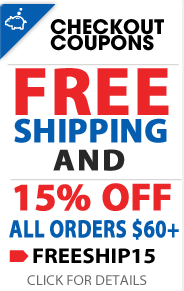
<style>
.page{position:relative;width:184px;height:291px;background:#ffffff}
.page>*{position:absolute;margin:0}
.t1{font:20px "AvantGarde-Bold";color:#000000;text-transform:uppercase}
.t2{font:68px "MyriadPro-Bold";letter-spacing:0.02em;color:#eb2629;text-transform:uppercase;font-weight:bold}
.t3{font:34px "MyriadPro-Bold";color:#055daf;text-transform:uppercase;font-weight:bold}
.t4{font:30px "MyriadPro-Bold";letter-spacing:0.06em;color:#282828;text-transform:uppercase;font-weight:bold;scale:1.07 1}
.t5{font:39px "MyriadPro-Bold";color:#eb2629;text-transform:uppercase;font-weight:bold}
.t6{font:25px "MyriadPro-Bold";color:#055daf;text-transform:uppercase;font-weight:bold;scale:0.81 1}
.t7{font:21.6px "MyriadPro-Bold";color:#000000;text-transform:uppercase;scale:1.06 1}
.t8{font:14px "MyriadPro-Regular";color:#696969;text-transform:uppercase;scale:1.06 1}
</style>
<div class="page">
<p class="t1" style="left:50px;top:19px;width:114px;height:16px">Checkout</p>
<p class="t1" style="left:50px;top:35px;width:104px;height:16px">cOUPONS</p>
<p class="t2" style="left:15px;top:68px;width:154px;height:47px">FREE</p>
<p class="t3" style="left:14px;top:118px;width:153px;height:25px">SHIPPING</p>
<p class="t4" style="left:53px;top:149px;width:72px;height:22px">AND</p>
<p class="t5" style="left:14px;top:183px;width:157px;height:28px">15% off</p>
<p class="t6" style="left:9px;top:218px;width:170px;height:22px">all ORDERS $60+</p>
<p class="t7" style="left:33px;top:248px;width:122px;height:16px">FREESHIP15</p>
<p class="t8" style="left:27px;top:275px;width:120px;height:10px">click for details</p>
</div>
